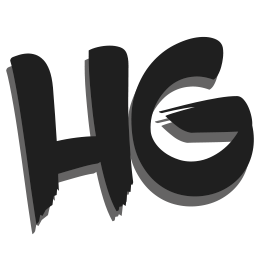
<style>
.page{position:relative;width:260px;height:260px;background:#ffffff}
.page>*{position:absolute;margin:0}
.t1{font:231.4px "BlowBrush";color:#1f1f1f}
.t2{font:231.4px "System";color:#000000}
.t3{font:231.4px "System";color:#1f1f1f}
</style>
<div class="page">
<p class="t1" style="left:10px;top:36px;width:244px;height:189px;rotate:-7deg"><span class="t2"> </span>HG</p>
<p class="t1" style="left:6px;top:46px;width:244px;height:189px;rotate:-7deg"><span class="t3"> </span>HG</p>
</div>
